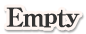
<style>
.page{position:relative;width:86px;height:34px;background:#ffffff}
.page>*{position:absolute;margin:0}
.t1{font:26px "RyuminPro-ExBold";letter-spacing:-0.08em;color:#333333;font-weight:bold}
.t2{font:20.8px "RyuminPro-ExBold";letter-spacing:-0.08em;color:#333333;font-weight:bold;scale:1.25 1}
</style>
<div class="page">
<p class="t1" style="left:6px;top:7px;width:74px;height:21px">Em<span class="t2">p</span>t<span class="t2">y</span></p>
</div>
